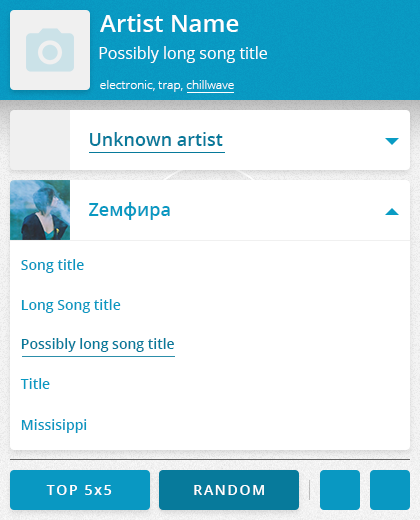
<style>
.page{position:relative;width:420px;height:520px;background:#ffffff}
.page>*{position:absolute;margin:0}
.t1{font:24px "OpenSans-Semibold";color:#ffffff}
.t2{font:16px "OpenSans";color:#ffffff}
.t3{font:12px "OpenSans-Light";color:#ffffff}
.t4{font:18px "OpenSans-Semibold";color:#077a9b}
.t5{font:18px "OpenSans-Semibold";color:#0999c2}
.t6{font:14px "OpenSans-Semibold";color:#0997c1}
.t7{font:14px "OpenSans-Semibold";color:#0999c2}
.t8{font:14px "OpenSans-Semibold";color:#077a9b}
.t9{font:14px "OpenSans-Semibold";color:#099ac3}
.t10{font:14px "OpenSans-Semibold";color:#0998c2}
.t11{font:14px "OpenSans-Semibold";letter-spacing:0.12em;color:#ffffff}
</style>
<div class="page">
<p class="t1" style="left:100px;top:14px;width:139px;height:18px">Artist Name</p>
<p class="t2" style="left:99px;top:46px;width:168px;height:17px">Possibly long song title</p>
<p class="t3" style="left:100px;top:80px;width:134px;height:12px">electronic, trap, chillwave</p>
<p class="t4" style="left:90px;top:132px;width:133px;height:14px">Unknown artist</p>
<p class="t5" style="left:89px;top:202px;width:81px;height:18px">Zемфира</p>
<p class="t6" style="left:21px;top:259px;width:63px;height:14px">Song title</p>
<p class="t7" style="left:21px;top:299px;width:100px;height:14px">Long Song title</p>
<p class="t8" style="left:21px;top:338px;width:153px;height:14px">Possibly long song title</p>
<p class="t9" style="left:20px;top:378px;width:30px;height:11px">Title</p>
<p class="t10" style="left:21px;top:419px;width:66px;height:14px">Missisippi</p>
<p class="t11" style="left:46px;top:485px;width:66px;height:10px">TOP 5x5</p>
<p class="t11" style="left:194px;top:485px;width:70px;height:10px">RANDOM</p>
</div>
